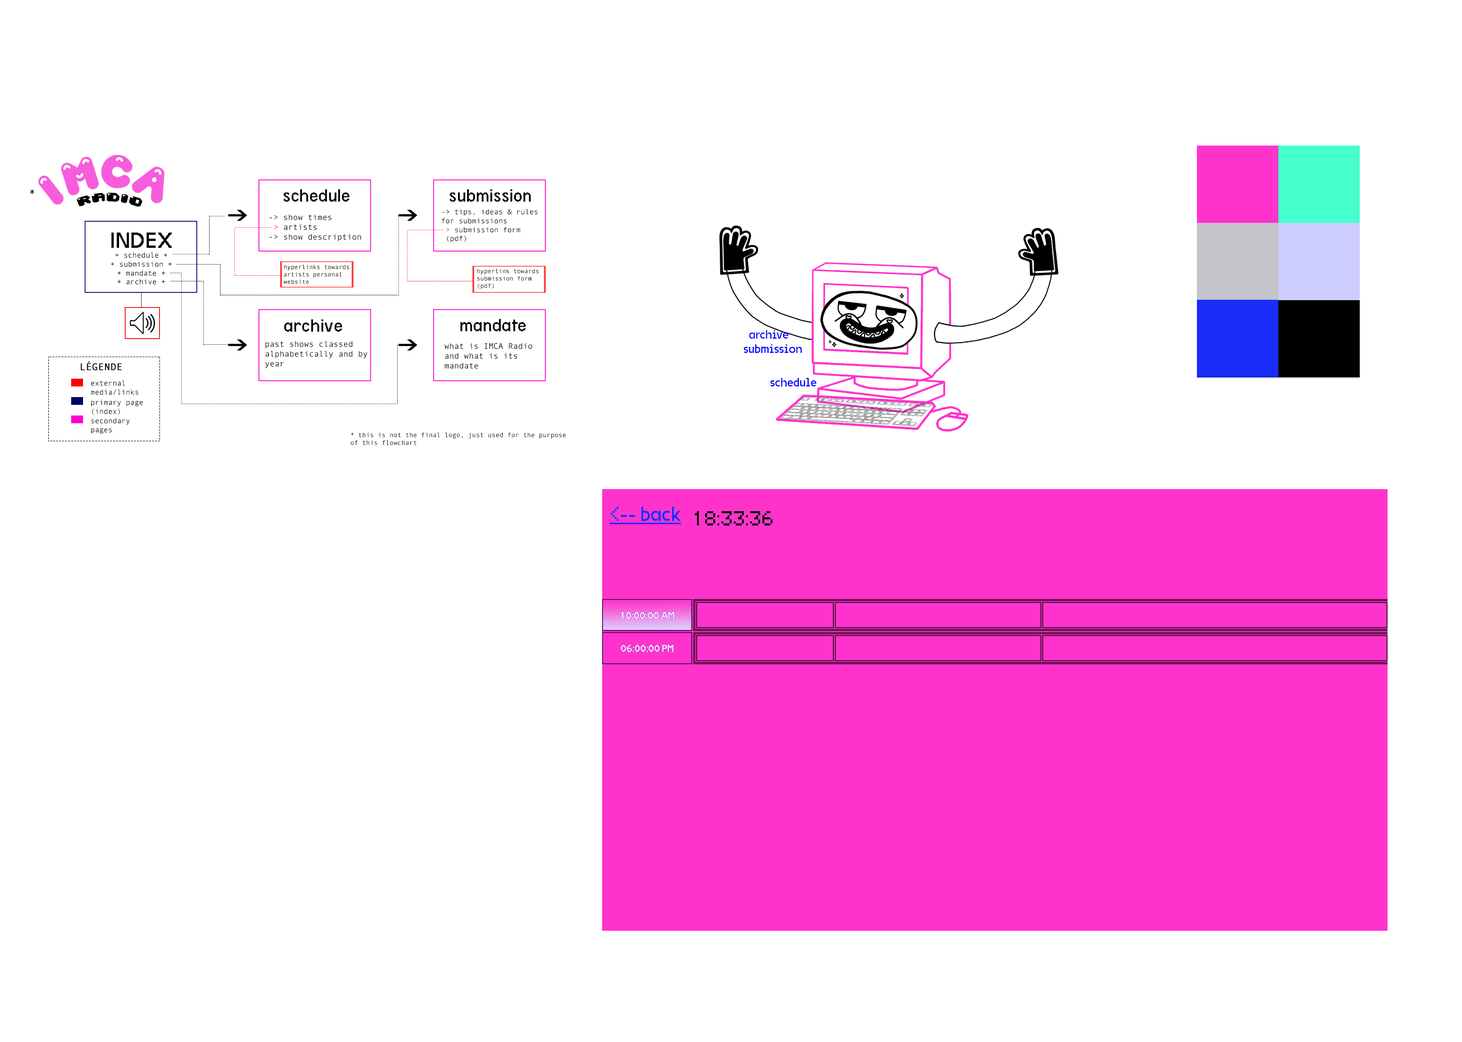
<style>
.page{position:relative;width:1462px;height:1042px;background:#ffffff}
.page>*{position:absolute;margin:0}
.t1{font:12.3px "AndaleMono";color:#000000}
.t2{font:12.3px "04b30";color:#000000}
.t3{font:19.6px "Terminal-Grotesque";color:#000000}
.t4{font:7.4px "AndaleMono";color:#000000}
.t5{font:7.4px "AndaleMono";color:#ff3333}
.t6{font:8.2px "AndaleMono";color:#000000}
.t7{font:8.2px "AndaleMono";color:#ff0000}
.t8{font:24.5px "Terminal-Grotesque";color:#000000}
.t9{font:6.1px "AndaleMono";color:#000000}
.t10{font:12.3px "VG5000-Regular";color:#090fff}
.t11{font:9.8px "AndaleMono";color:#000000;font-weight:bold}
.t12{font:6.5px "AndaleMono";color:#000000}
</style>
<div class="page">
<p class="t1" style="left:30px;top:189px;width:4px;height:5px">*</p>
<p class="t2" style="left:76px;top:193px;width:67px;height:14px;rotate:9deg">radio</p>
<p class="t3" style="left:284px;top:189px;width:65px;height:13px">schedule</p>
<p class="t3" style="left:450px;top:189px;width:81px;height:13px">submission</p>
<p class="t4" style="left:442px;top:209px;width:96px;height:34px">-&gt; tips, ideas &amp; rules for submissions <br><span class="t5"> &gt;</span> submission form <br> (pdf)</p>
<p class="t6" style="left:270px;top:214px;width:91px;height:27px">-&gt; show times<br><span class="t7"> &gt; </span>artists<br>-&gt; show description</p>
<p class="t8" style="left:111px;top:232px;width:61px;height:16px">INDEX</p>
<p class="t4" style="left:111px;top:252px;width:61px;height:33px;text-align:center">+ schedule +<br>+ submission +<br>+ mandate + <br>+ archive +</p>
<p class="t9" style="left:284px;top:265px;width:65px;height:19px">hyperlinks towards <br>artists personal <br>website</p>
<p class="t9" style="left:477px;top:269px;width:62px;height:20px">hyperlink towards <br>submission form <br>(pdf)</p>
<p class="t3" style="left:284px;top:320px;width:58px;height:12px">archive</p>
<p class="t3" style="left:460px;top:319px;width:66px;height:12px">mandate</p>
<p class="t6" style="left:265px;top:341px;width:102px;height:27px">past shows classed alphabetically and by year</p>
<p class="t10" style="left:749px;top:330px;width:40px;height:9px">archive</p>
<p class="t6" style="left:445px;top:343px;width:87px;height:26px">what is IMCA Radio <br>and what is its <br>mandate</p>
<p class="t10" style="left:744px;top:344px;width:58px;height:9px">submission</p>
<p class="t11" style="left:81px;top:361px;width:41px;height:10px">LÉGENDE</p>
<p class="t4" style="left:91px;top:380px;width:47px;height:15px">external media/links</p>
<p class="t10" style="left:770px;top:378px;width:47px;height:9px">schedule</p>
<p class="t4" style="left:91px;top:400px;width:52px;height:15px">primary page (index)</p>
<p class="t4" style="left:91px;top:418px;width:39px;height:16px">secondary pages</p>
<p class="t12" style="left:351px;top:432px;width:215px;height:14px">* this is not the final logo, just used for the purpose of this flowchart</p>
</div>
